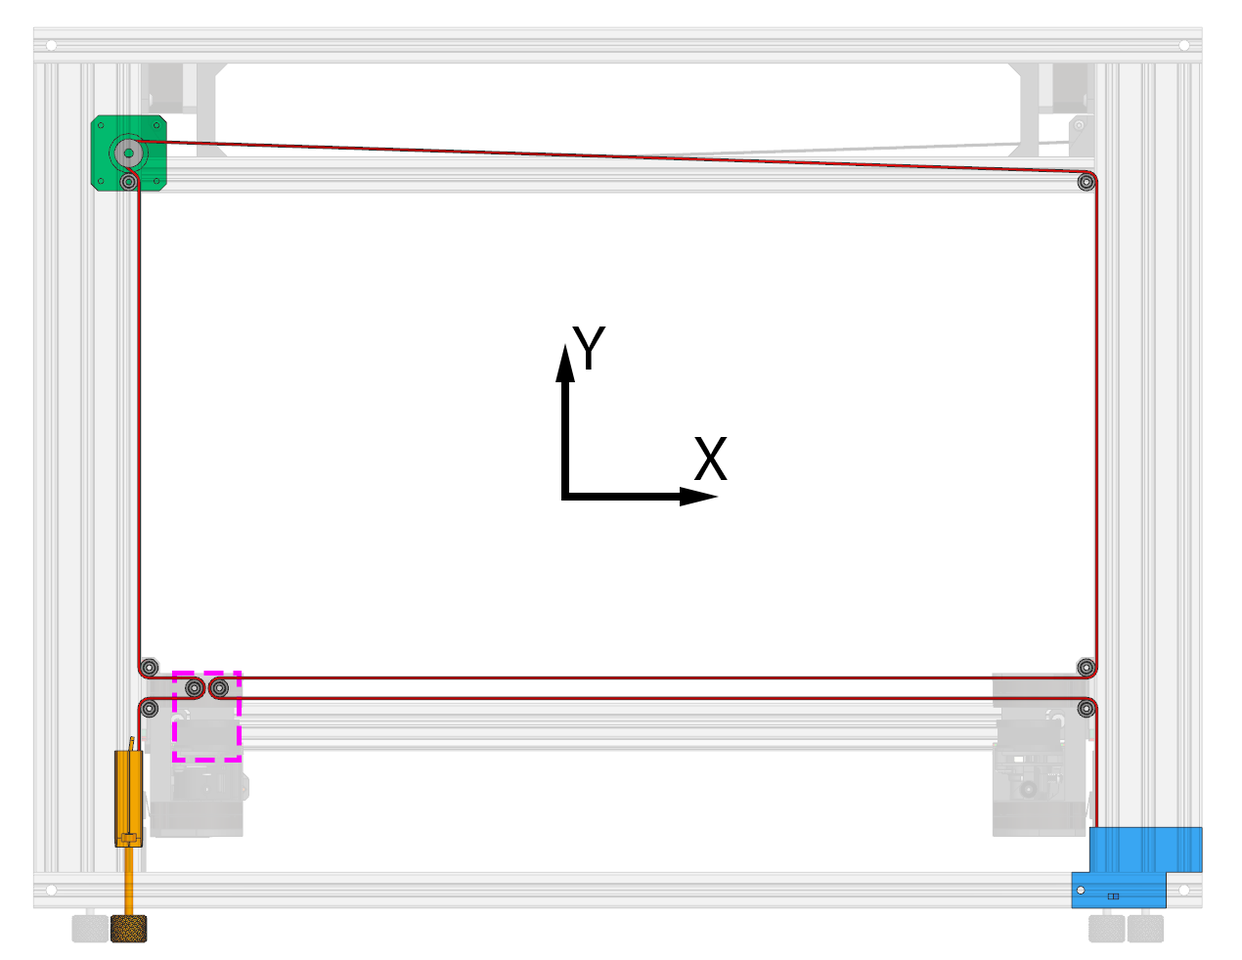
<style>
.page{position:relative;width:1242px;height:960px;background:#ffffff}
.page>*{position:absolute;margin:0}
.t1{font:64.5px "MyriadPro-Regular";color:#000000}
</style>
<div class="page">
<p class="t1" style="left:572px;top:327px;width:34px;height:43px">Y</p>
<p class="t1" style="left:693px;top:437px;width:34px;height:43px">X</p>
</div>
